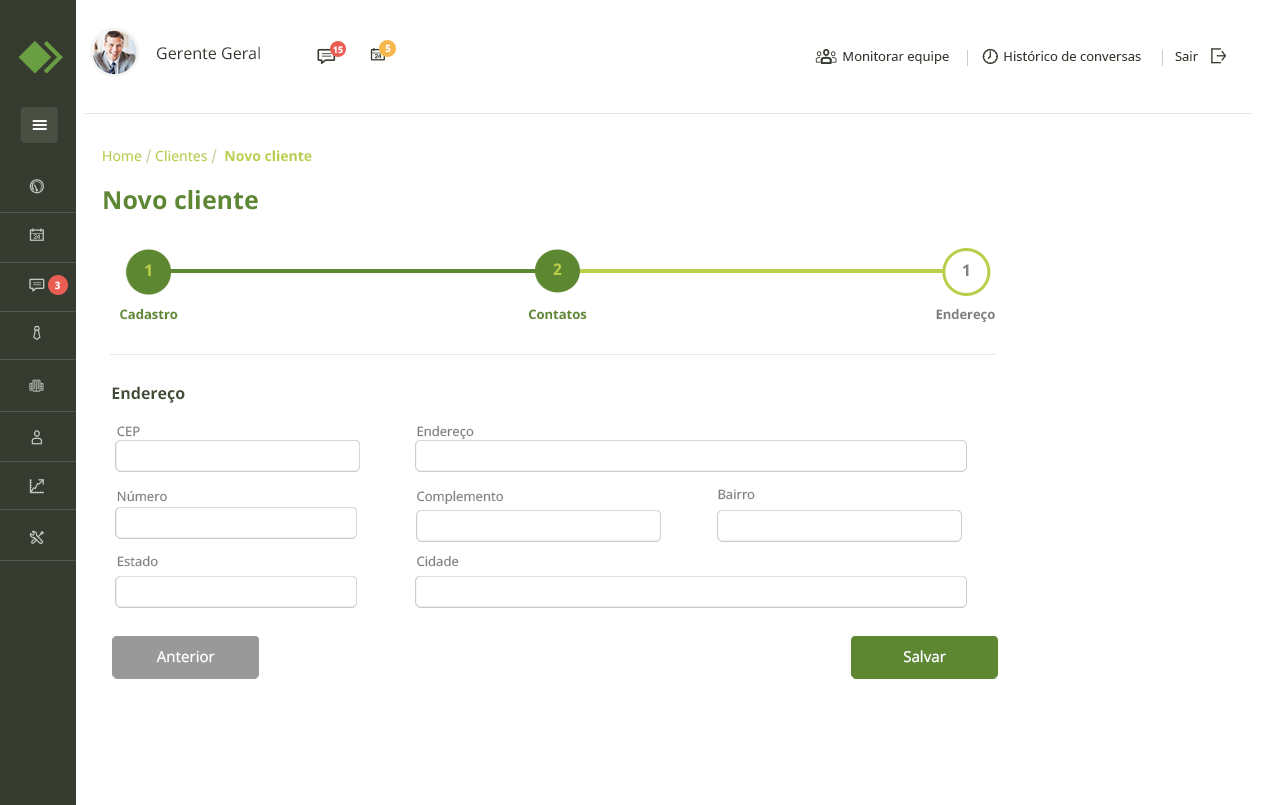
<style>
.page{position:relative;width:1280px;height:805px;background:#ffffff}
.page>*{position:absolute;margin:0}
.t1{font:16px "NotoSans";color:#353b2f}
.t2{font:9px "NotoSans-Bold";color:#ffffff}
.t3{font:10px "NotoSans-Bold";color:#ffffff}
.t4{font:13px "NotoSans";color:#353b2f}
.t5{font:14px "NotoSans-Bold";color:#b8cf49}
.t6{font:14px "NotoSans";color:#b8cf49}
.t7{font:14px "NotoSans";color:#c7cfa1}
.t8{font:25px "NotoSans-Bold";color:#5d8730}
.t9{font:16px "NotoSans-Bold";color:#b8cf49}
.t10{font:16px "NotoSans-Bold";color:#808080}
.t11{font:13px "NotoSans-Bold";color:#5d8730}
.t12{font:13px "NotoSans-Bold";color:#808080}
.t13{font:16px "NotoSans-Bold";color:#424d38}
.t14{font:13px/64.9px "NotoSans";color:#808080}
.t15{font:13px "NotoSans";color:#808080}
.t16{font:15px "NotoSans";color:#ffffff}
</style>
<div class="page">
<p class="t1" style="left:157px;top:46px;width:103px;height:14px">Gerente Geral</p>
<p class="t2" style="left:333px;top:46px;width:10px;height:8px">15</p>
<p class="t3" style="left:385px;top:44px;width:6px;height:9px">5</p>
<p class="t4" style="left:843px;top:51px;width:355px;height:13px">Monitorar equipe                Histórico de conversas          Sair</p>
<p class="t5" style="left:103px;top:149px;width:209px;height:15px"><span class="t6">Home </span><span class="t7">/</span><span class="t6"> Clientes </span><span class="t7">/  </span>Novo cliente</p>
<p class="t8" style="left:104px;top:190px;width:154px;height:20px">Novo cliente</p>
<p class="t9" style="left:145px;top:264px;width:6px;height:12px">1</p>
<p class="t9" style="left:553px;top:263px;width:9px;height:12px">2</p>
<p class="t10" style="left:962px;top:264px;width:7px;height:12px">1</p>
<p class="t3" style="left:55px;top:281px;width:5px;height:9px">3</p>
<p class="t11" style="left:120px;top:308px;width:58px;height:12px">Cadastro</p>
<p class="t11" style="left:528px;top:309px;width:59px;height:11px">Contatos</p>
<p class="t12" style="left:936px;top:308px;width:59px;height:15px">Endereço</p>
<p class="t13" style="left:112px;top:386px;width:73px;height:17px">Endereço</p>
<p class="t14" style="left:417px;top:425px;width:87px;height:142px">Endereço<br>Complemento<br>Cidade</p>
<p class="t14" style="left:117px;top:426px;width:50px;height:141px">CEP<br>Número<br>Estado</p>
<p class="t15" style="left:718px;top:489px;width:37px;height:11px">Bairro</p>
<p class="t16" style="left:156px;top:650px;width:59px;height:13px">Anterior</p>
<p class="t16" style="left:903px;top:650px;width:43px;height:13px">Salvar</p>
</div>
